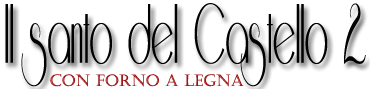
<style>
.page{position:relative;width:370px;height:89px;background:#ffffff}
.page>*{position:absolute;margin:0}
.t1{font:96px "Riesling";color:#000000;scale:0.53 1}
.t2{font:16px "Castellar";color:#9f1414}
</style>
<div class="page">
<p class="t1" style="left:5px;top:3px;width:361px;height:84px">Il santo del Castello 2</p>
<p class="t2" style="left:50px;top:74px;width:194px;height:13px">CON FORNO A LEGNA</p>
</div>
